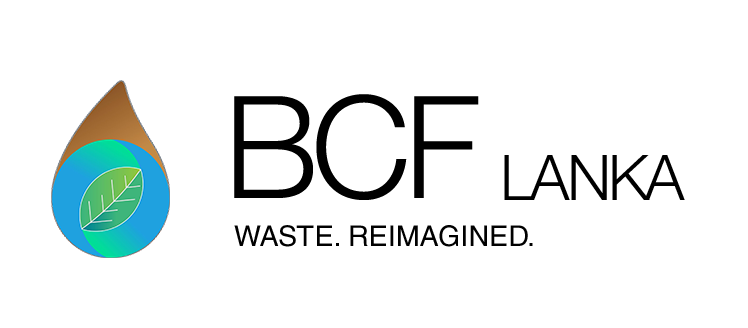
<style>
.page{position:relative;width:748px;height:328px;background:#ffffff}
.page>*{position:absolute;margin:0}
.t1{font:142.4px "HelveticaNeue-Light";letter-spacing:-0.05em;color:#000000}
.t2{font:62.9px "HelveticaNeue-Light";letter-spacing:-0.05em;color:#000000;text-transform:uppercase}
.t3{font:28.6px "HelveticaLTStd-Roman";letter-spacing:0.005em;color:#000000;text-transform:uppercase}
</style>
<div class="page">
<p class="t1" style="left:234px;top:94px;width:245px;height:106px">BCF</p>
<p class="t2" style="left:504px;top:155px;width:181px;height:45px">Lanka</p>
<p class="t3" style="left:234px;top:225px;width:299px;height:22px">WASTE. REIMAGINED.</p>
</div>
